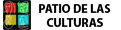
<style>
.page{position:relative;width:121px;height:30px;background:#ffffff}
.page>*{position:absolute;margin:0}
.t1{font:12px "MyriadPro-Bold";color:#000000}
</style>
<div class="page">
<p class="t1" style="left:39px;top:4px;width:72px;height:23px;text-align:center">PATIO DE LAS <br>CULTURAS</p>
</div>
